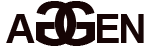
<style>
.page{position:relative;width:150px;height:50px;background:#ffffff}
.page>*{position:absolute;margin:0}
.t1{font:60px "Arial-BoldMT";color:#160505}
.t2{font:40px "Arial-BoldMT";color:#160505}
</style>
<div class="page">
<p class="t1" style="left:36px;top:1px;width:41px;height:45px;rotate:180deg">G</p>
<p class="t1" style="left:54px;top:1px;width:41px;height:45px">G</p>
<p class="t2" style="left:6px;top:14px;width:29px;height:29px">A</p>
<p class="t2" style="left:97px;top:14px;width:22px;height:29px">E</p>
<p class="t2" style="left:121px;top:14px;width:23px;height:29px">N</p>
</div>
